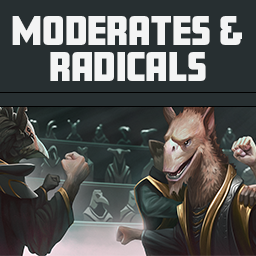
<style>
.page{position:relative;width:256px;height:256px;background:#272f31}
.page>*{position:absolute;margin:0}
.t1{font:36px/36px "Amboy-Black";color:#f3f4f4}
</style>
<div class="page">
<p class="t1" style="left:12px;top:16px;width:230px;height:65px;text-align:center">Moderates &amp;<br>rADICALS</p>
</div>
